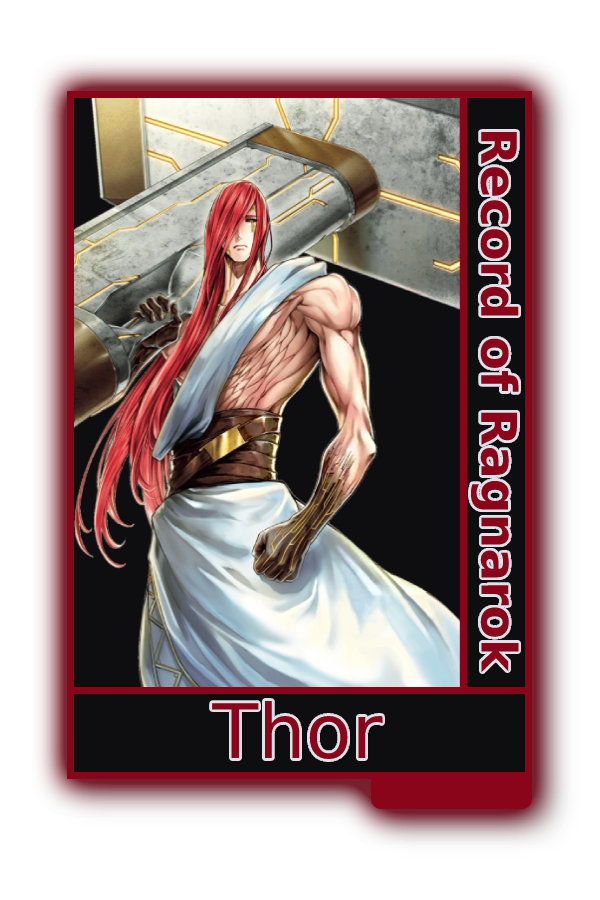
<style>
.page{position:relative;width:600px;height:900px;background:#ffffff}
.page>*{position:absolute;margin:0}
.t1{font:48.8px "MADETOMMY-Bold";color:#8a051a}
.t2{font:75px "CoolveticaRg-Regular";color:#8a051a}
</style>
<div class="page">
<p class="t1" style="left:470px;top:131px;width:49px;height:542px;rotate:90deg">Record of Ragnarok</p>
<p class="t2" style="left:212px;top:701px;width:171px;height:59px">Thor</p>
</div>
